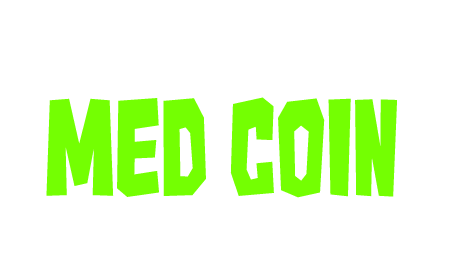
<style>
.page{position:relative;width:453px;height:277px;background:#ffffff}
.page>*{position:absolute;margin:0}
.t1{font:118.1px "Kaiju-Monster__G";color:#74ff02}
</style>
<div class="page">
<p class="t1" style="left:46px;top:97px;width:351px;height:101px">Med Coin</p>
</div>
